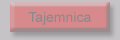
<style>
.page{position:relative;width:120px;height:40px;background:#d7898b}
.page>*{position:absolute;margin:0}
.t1{font:14px "ArialMT";color:#8b898b}
</style>
<div class="page">
<p class="t1" style="left:28px;top:12px;width:63px;height:13px">Tajemnica</p>
</div>
